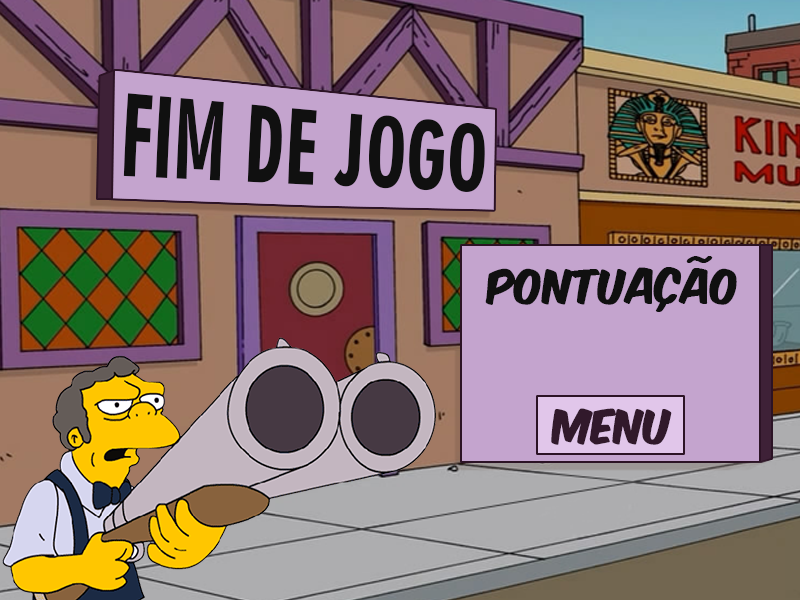
<style>
.page{position:relative;width:800px;height:600px}
.page>*{position:absolute;margin:0}
.t1{font:86.5px "Geometric706BT-BlackCondensedB";color:#101010;scale:0.87 1}
.t2{font:40.6px "KomikaAxis";color:#101010}
.t3{font:40.6px "KomikaAxis";color:#31192b}
</style>
<div class="page">
<p class="t1" style="left:123px;top:93px;width:362px;height:99px;rotate:4deg">FIM DE JOGO</p>
<p class="t2" style="left:485px;top:256px;width:252px;height:56px">Pontuação</p>
<p class="t3" style="left:551px;top:408px;width:121px;height:37px">MENU</p>
</div>
